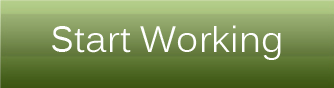
<style>
.page{position:relative;width:334px;height:88px}
.page>*{position:absolute;margin:0}
.t1{font:36.3px "Kalinga";color:#ffffff}
</style>
<div class="page">
<p class="t1" style="left:52px;top:25px;width:229px;height:35px">Start Working</p>
</div>
